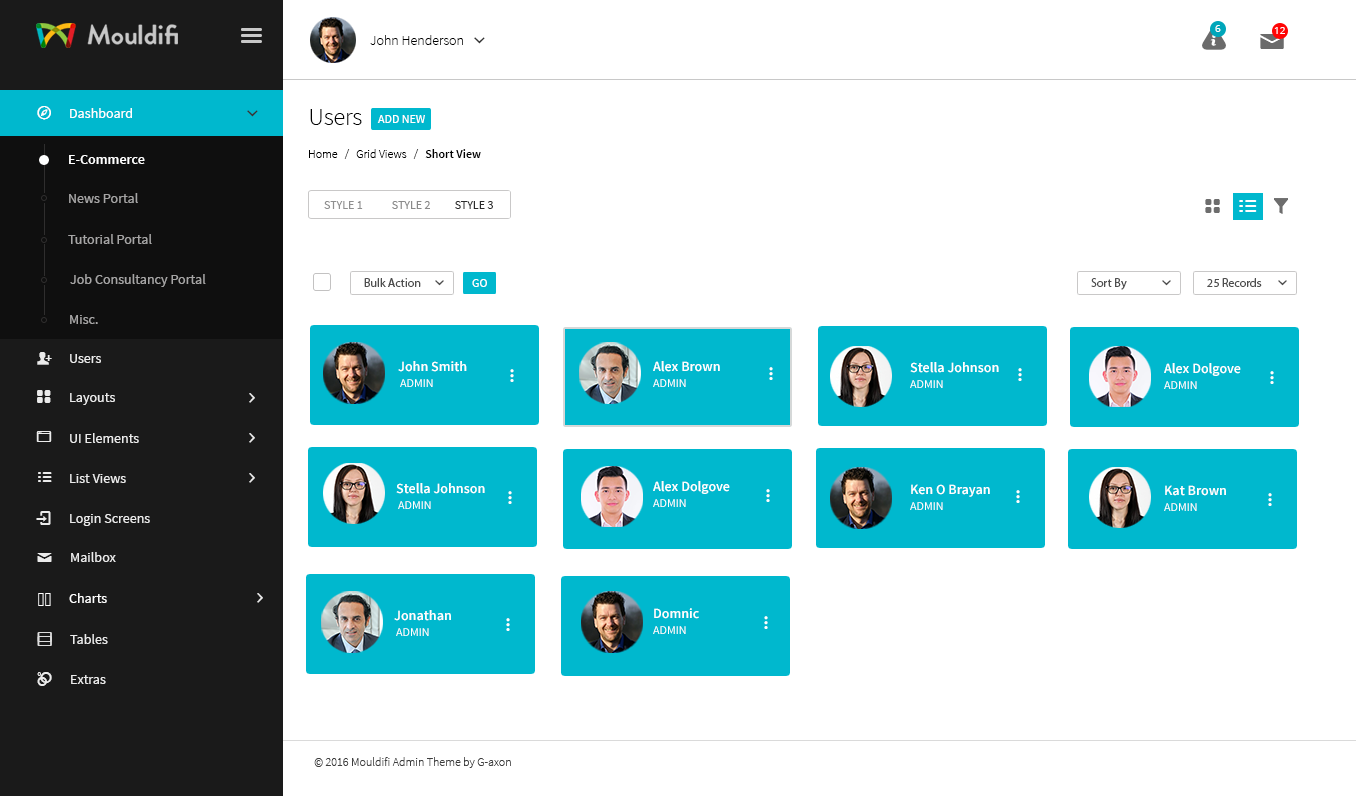
<style>
.page{position:relative;width:1356px;height:796px;background:#ffffff}
.page>*{position:absolute;margin:0}
.t1{font:10px "OpenSans";color:#ffffff}
.t2{font:14px "SourceSansPro-Light";color:#000000}
.t3{font:14px "SourceSansPro-Regular";color:#ffffff}
.t4{font:14px "SourceSansPro-Regular";color:#ffffff;font-variant:small-caps}
.t5{font:24px "SourceSansPro-Light";color:#000000}
.t6{font:12px "SourceSansPro-Regular";color:#ffffff;text-transform:uppercase}
.t7{font:12px "SourceSansPro-Light";color:#000000}
.t8{font:12px "SourceSansPro-Semibold";color:#000000}
.t9{font:14px "SourceSansPro-Semibold";color:#ffffff}
.t10{font:14px "SourceSansPro-Regular";color:#a6a5a5}
.t11{font:12px "SourceSansPro-Regular";color:#8f8f8f;text-transform:uppercase}
.t12{font:12px "SourceSansPro-Regular";color:#8a8a8a;text-transform:uppercase}
.t13{font:12px "SourceSansPro-Regular";color:#2b2b2b;text-transform:uppercase}
.t14{font:13.7px "SourceSansPro-Regular";color:#a6a5a5}
.t15{font:12px "MyriadPro-Regular";color:#4e4e4e}
.t16{font:14px "SourceSansPro-Regular";color:#ebebeb}
.t17{font:13.7px "SourceSansPro-Regular";color:#ebebeb}
.t18{font:12px "SourceSansPro-Light";color:#3e3e3e}
</style>
<div class="page">
<p class="t1" style="left:1215px;top:25px;width:6px;height:7px">6</p>
<p class="t1" style="left:1274px;top:27px;width:11px;height:7px">12</p>
<p class="t2" style="left:370px;top:35px;width:93px;height:10px">John Henderson</p>
<p class="t3" style="left:70px;top:108px;width:62px;height:10px"><span class="t4">D</span>ashboard</p>
<p class="t5" style="left:310px;top:109px;width:52px;height:16px">Users</p>
<p class="t6" style="left:377px;top:115px;width:48px;height:8px">add new</p>
<p class="t7" style="left:309px;top:149px;width:172px;height:10px">Home   /   Grid Views   /  <span class="t8"> Short View</span></p>
<p class="t9" style="left:69px;top:155px;width:76px;height:9px">E-Commerce</p>
<p class="t10" style="left:69px;top:193px;width:69px;height:10px">News Portal</p>
<p class="t11" style="left:324px;top:201px;width:169px;height:8px">Style 1            <span class="t12">Style 2          </span><span class="t13">Style 3</span></p>
<p class="t14" style="left:68px;top:234px;width:84px;height:10px">Tutorial Portal</p>
<p class="t14" style="left:70px;top:274px;width:136px;height:13px">Job Consultancy Portal</p>
<p class="t15" style="left:364px;top:278px;width:57px;height:9px">Bulk Action</p>
<p class="t6" style="left:472px;top:279px;width:15px;height:8px">go</p>
<p class="t15" style="left:1091px;top:278px;width:36px;height:12px">Sort By</p>
<p class="t15" style="left:1207px;top:278px;width:55px;height:9px">25 Records</p>
<p class="t14" style="left:70px;top:315px;width:28px;height:9px">Misc.</p>
<p class="t16" style="left:70px;top:354px;width:31px;height:9px">Users</p>
<p class="t9" style="left:398px;top:361px;width:69px;height:11px">John Smith</p>
<p class="t9" style="left:653px;top:361px;width:67px;height:11px">Alex Brown</p>
<p class="t9" style="left:910px;top:362px;width:89px;height:11px">Stella Johnson</p>
<p class="t9" style="left:1164px;top:363px;width:77px;height:13px">Alex Dolgove</p>
<p class="t6" style="left:400px;top:379px;width:33px;height:8px">admin</p>
<p class="t6" style="left:653px;top:379px;width:33px;height:8px">admin</p>
<p class="t6" style="left:910px;top:380px;width:33px;height:8px">admin</p>
<p class="t6" style="left:1164px;top:381px;width:33px;height:8px">admin</p>
<p class="t16" style="left:70px;top:393px;width:45px;height:12px">Layouts</p>
<p class="t16" style="left:70px;top:433px;width:69px;height:10px">UI Elements</p>
<p class="t16" style="left:70px;top:474px;width:56px;height:9px">List Views</p>
<p class="t9" style="left:396px;top:483px;width:89px;height:11px">Stella Johnson</p>
<p class="t9" style="left:653px;top:481px;width:77px;height:13px">Alex Dolgove</p>
<p class="t9" style="left:911px;top:484px;width:79px;height:13px">Ken O Brayan</p>
<p class="t9" style="left:1165px;top:485px;width:61px;height:11px">Kat Brown</p>
<p class="t6" style="left:398px;top:501px;width:33px;height:8px">admin</p>
<p class="t6" style="left:653px;top:499px;width:33px;height:8px">admin</p>
<p class="t6" style="left:910px;top:502px;width:33px;height:8px">admin</p>
<p class="t6" style="left:1164px;top:503px;width:33px;height:8px">admin</p>
<p class="t16" style="left:70px;top:514px;width:80px;height:12px">Login Screens</p>
<p class="t16" style="left:71px;top:552px;width:45px;height:10px">Mailbox</p>
<p class="t3" style="left:69px;top:593px;width:38px;height:10px">Charts</p>
<p class="t9" style="left:394px;top:610px;width:57px;height:11px">Jonathan</p>
<p class="t9" style="left:654px;top:608px;width:45px;height:11px">Domnic</p>
<p class="t6" style="left:396px;top:628px;width:33px;height:8px">admin</p>
<p class="t6" style="left:653px;top:626px;width:33px;height:8px">admin</p>
<p class="t17" style="left:70px;top:634px;width:38px;height:10px">Tables</p>
<p class="t17" style="left:71px;top:675px;width:35px;height:9px">Extras</p>
<p class="t18" style="left:314px;top:757px;width:197px;height:11px">© 2016 Mouldifi Admin Theme by G-axon</p>
</div>
